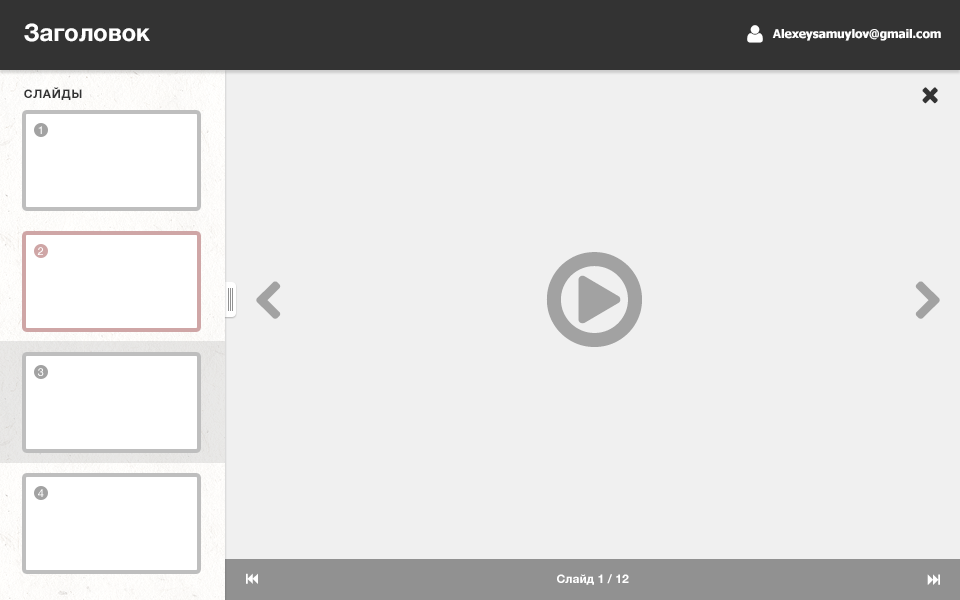
<style>
.page{position:relative;width:960px;height:600px;background:#f0f0f0}
.page>*{position:absolute;margin:0}
.t1{font:24px "HelveticaNeue-Bold";color:#ffffff}
.t2{font:12px "Tahoma-Bold";color:#ffffff}
.t3{font:12px "HelveticaNeue-Bold";letter-spacing:0.05em;color:#333333;text-transform:uppercase}
.t4{font:11px "HelveticaNeue";color:#ffffff}
.t5{font:12px "HelveticaNeue-Bold";color:#ffffff}
</style>
<div class="page">
<p class="t1" style="left:24px;top:23px;width:126px;height:19px">Заголовок</p>
<p class="t2" style="left:772px;top:29px;width:169px;height:12px">Alexeysamuylov@gmail.com</p>
<p class="t3" style="left:24px;top:87px;width:58px;height:13px">Слайды</p>
<p class="t4" style="left:38px;top:126px;width:4px;height:8px">1</p>
<p class="t4" style="left:37px;top:247px;width:6px;height:8px">2</p>
<p class="t4" style="left:38px;top:368px;width:6px;height:8px">3</p>
<p class="t4" style="left:38px;top:489px;width:6px;height:8px">4</p>
<p class="t5" style="left:557px;top:574px;width:72px;height:11px">Слайд 1 / 12</p>
</div>
